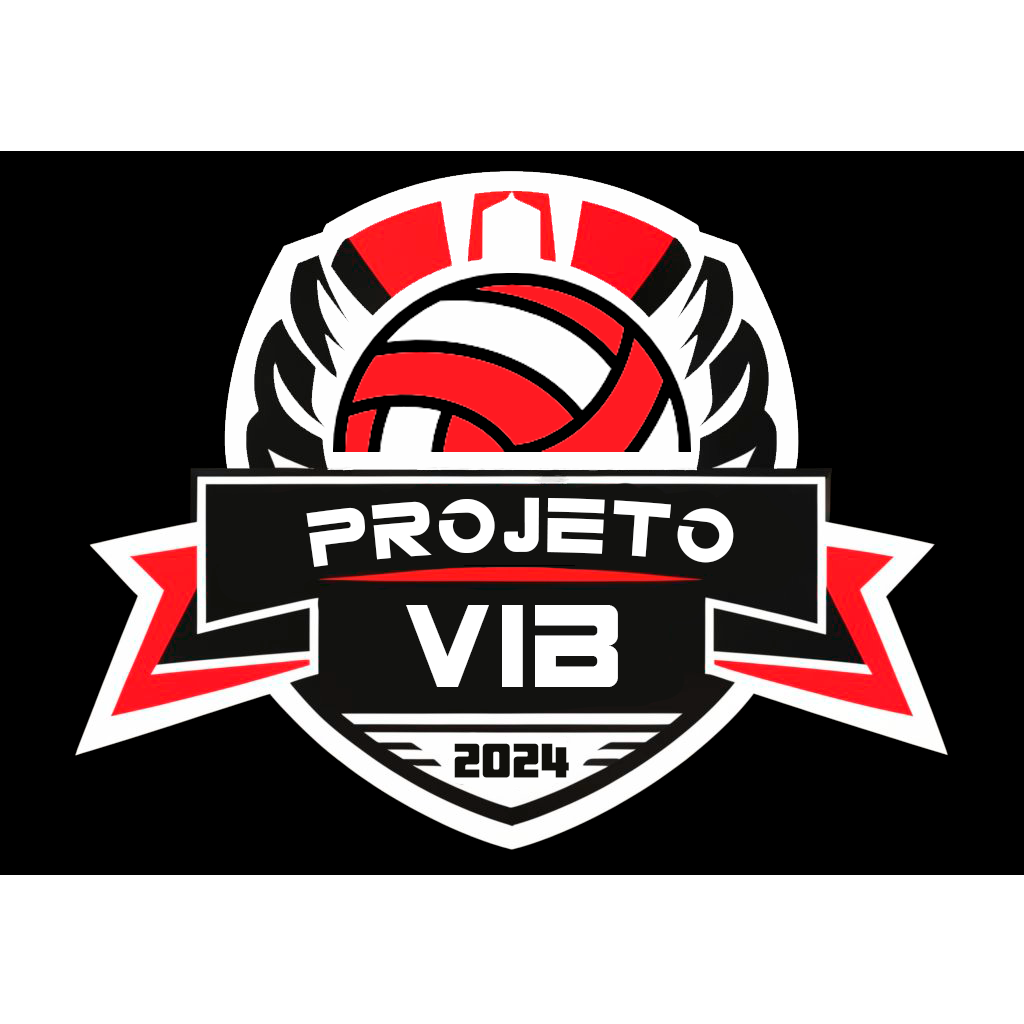
<style>
.page{position:relative;width:1024px;height:1024px;background:#000000}
.page>*{position:absolute;margin:0}
.t1{font:60px "NDLOGOS";color:#ffffff}
.t2{font:92px "NDLOGOS";color:#ffffff}
</style>
<div class="page">
<p class="t1" style="left:306px;top:497px;width:428px;height:70px">PROJETO</p>
<p class="t2" style="left:406px;top:605px;width:212px;height:82px">VIB</p>
</div>
